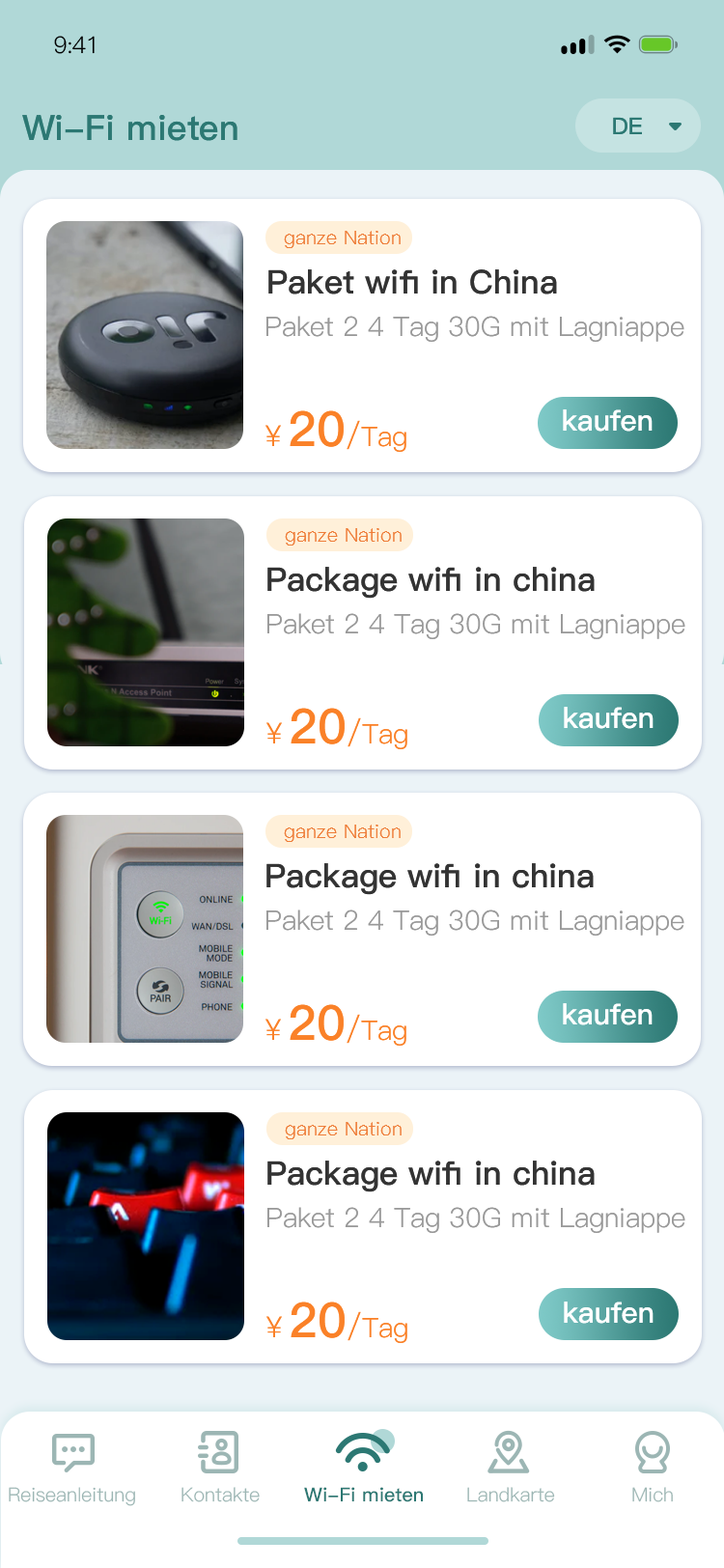
<style>
.page{position:relative;width:724px;height:1568px;background:#ffffff}
.page>*{position:absolute;margin:0}
.t1{font:23.2px "PingFang-SC-Regular";letter-spacing:-0.025em;color:#000000}
.t2{font:34.8px "PingFang-SC-Bold";color:#2c7873}
.t3{font:23.2px "PingFang-SC-Bold";color:#2c7873}
.t4{font:19.3px "PingFang-SC-Regular";color:#ee7d39}
.t5{font:32.8px "PingFang-SC-Bold";color:#333333}
.t6{font:27px "PingFang-SC-Regular";color:#999999}
.t7{font:27px "PingFang-SC-Regular";color:#fa8128}
.t8{font:29px "PingFang-SC-Regular";color:#fa8128}
.t9{font:48.3px "PingFang-SC-Bold";color:#fa8128}
.t10{font:30.9px "PingFang-SC-Regular";color:#fa8128}
.t11{font:29px "PingFang-SC-Bold";color:#ffffff}
.t12{font:32.8px "PingFang-SC-Bold";color:#333333;text-transform:uppercase}
.t13{font:19.3px "PingFang-SC-Regular";color:#9cb6b4}
.t14{font:19.3px "PingFang-SC-Bold";color:#2c7873}
.t15{font:19.3px "PingFang-SC-Regular";color:#9eb7b5}
</style>
<div class="page">
<p class="t1" style="left:54px;top:36px;width:41px;height:18px">9:41</p>
<p class="t2" style="left:22px;top:115px;width:216px;height:26px">Wi-Fi mieten</p>
<p class="t3" style="left:613px;top:117px;width:29px;height:17px">DE</p>
<p class="t4" style="left:284px;top:231px;width:117px;height:17px">ganze Nation</p>
<p class="t5" style="left:268px;top:269px;width:289px;height:25px">Paket wifi in China</p>
<p class="t6" style="left:266px;top:316px;width:419px;height:26px">Paket 2 4 Tag 30G mit Lagniappe</p>
<p class="t7" style="left:266px;top:410px;width:140px;height:42px"><span class="t8">￥</span><span class="t9">20</span><span class="t10">/</span>Tag</p>
<p class="t11" style="left:563px;top:409px;width:90px;height:23px">kaufen</p>
<p class="t4" style="left:285px;top:528px;width:117px;height:18px">ganze Nation</p>
<p class="t5" style="left:267px;top:567px;width:328px;height:32px"><span class="t12">p</span>ackage wifi in china</p>
<p class="t6" style="left:267px;top:613px;width:419px;height:26px">Paket 2 4 Tag 30G mit Lagniappe</p>
<p class="t7" style="left:266px;top:708px;width:141px;height:41px"><span class="t8">￥</span><span class="t9">20</span><span class="t10">/</span>Tag</p>
<p class="t11" style="left:564px;top:707px;width:90px;height:22px">kaufen</p>
<p class="t4" style="left:284px;top:825px;width:117px;height:17px">ganze Nation</p>
<p class="t5" style="left:266px;top:863px;width:328px;height:32px"><span class="t12">p</span>ackage wifi in china</p>
<p class="t6" style="left:266px;top:910px;width:419px;height:26px">Paket 2 4 Tag 30G mit Lagniappe</p>
<p class="t7" style="left:266px;top:1004px;width:140px;height:42px"><span class="t8">￥</span><span class="t9">20</span><span class="t10">/</span>Tag</p>
<p class="t11" style="left:563px;top:1003px;width:90px;height:22px">kaufen</p>
<p class="t4" style="left:285px;top:1122px;width:117px;height:17px">ganze Nation</p>
<p class="t5" style="left:267px;top:1161px;width:328px;height:31px"><span class="t12">p</span>ackage wifi in china</p>
<p class="t6" style="left:267px;top:1207px;width:419px;height:26px">Paket 2 4 Tag 30G mit Lagniappe</p>
<p class="t7" style="left:266px;top:1302px;width:141px;height:41px"><span class="t8">￥</span><span class="t9">20</span><span class="t10">/</span>Tag</p>
<p class="t11" style="left:564px;top:1302px;width:90px;height:22px">kaufen</p>
<p class="t13" style="left:9px;top:1487px;width:126px;height:19px">Reiseanleitung</p>
<p class="t13" style="left:182px;top:1487px;width:78px;height:15px">Kontakte</p>
<p class="t14" style="left:304px;top:1487px;width:119px;height:15px">Wi-Fi mieten</p>
<p class="t13" style="left:467px;top:1487px;width:88px;height:15px">Landkarte</p>
<p class="t15" style="left:632px;top:1487px;width:41px;height:15px">Mich</p>
</div>
